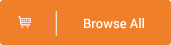
<style>
.page{position:relative;width:171px;height:45px;background:#f07f2a}
.page>*{position:absolute;margin:0}
.t1{font:13px "Roboto-Medium";color:#ffffff}
</style>
<div class="page">
<p class="t1" style="left:84px;top:18px;width:60px;height:11px">Browse All</p>
</div>
